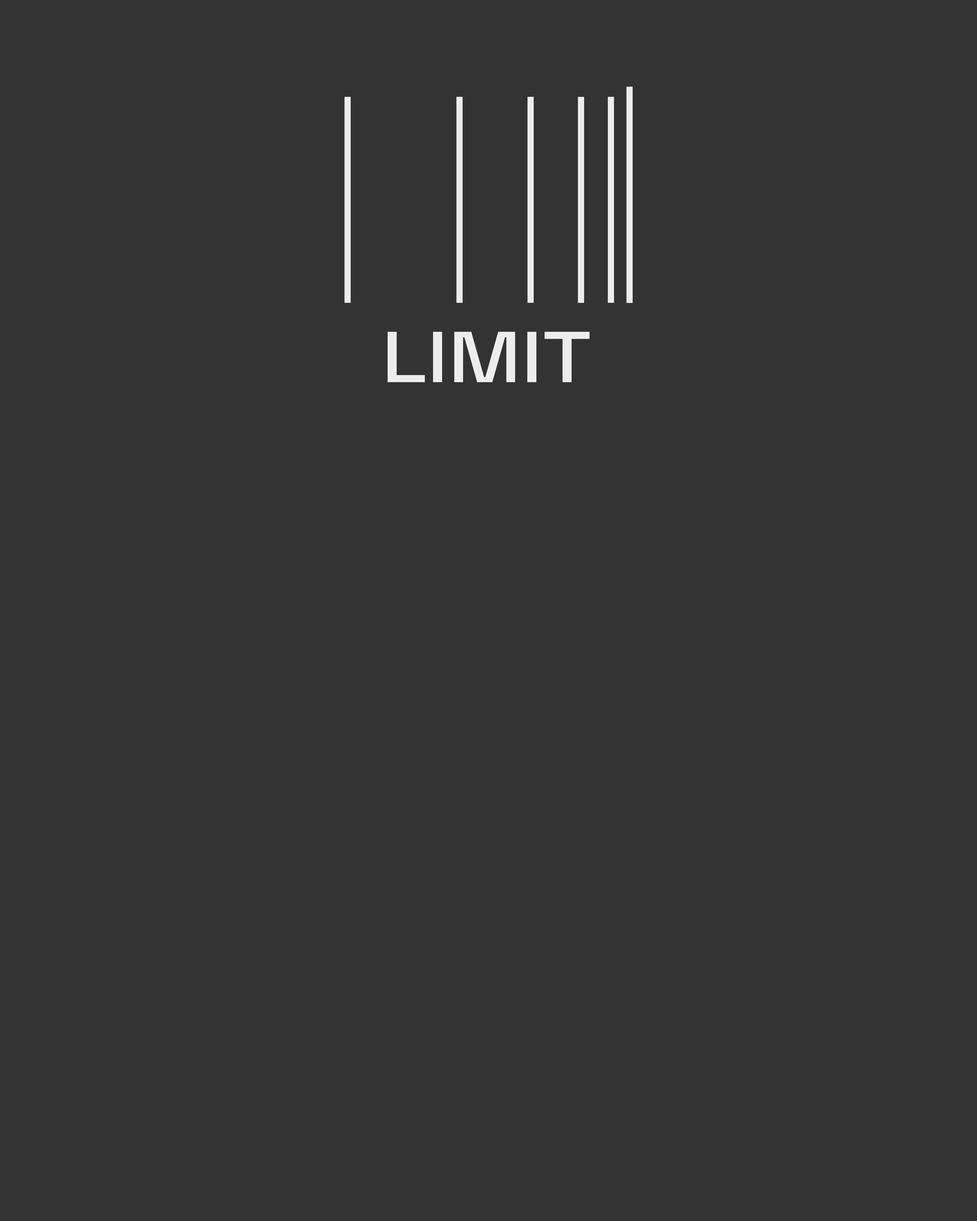
<style>
.page{position:relative;width:977px;height:1221px;background:#333333}
.page>*{position:absolute;margin:0}
.t1{font:72px "SpaceGroteskLight-Medium";color:#ededed;scale:1.16 1}
</style>
<div class="page">
<p class="t1" style="left:387px;top:332px;width:202px;height:50px">LIMIT</p>
</div>
